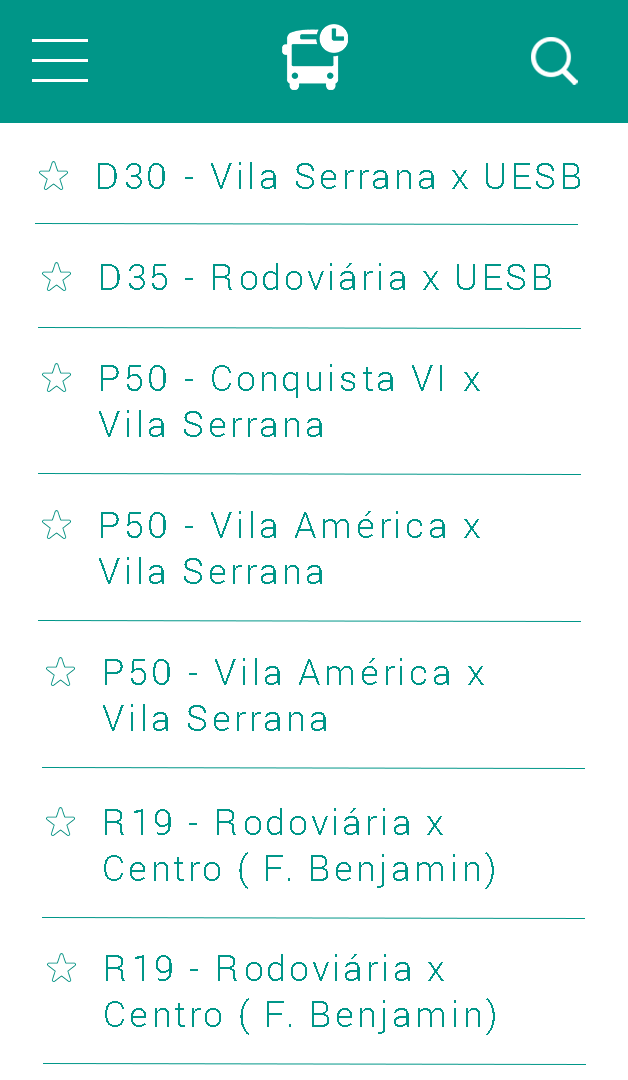
<style>
.page{position:relative;width:628px;height:1080px;background:#ffffff}
.page>*{position:absolute;margin:0}
.t1{font:35.9px "Roboto-Light";letter-spacing:0.1em;color:#009688}
.t2{font:35.9px/46px "Roboto-Light";letter-spacing:0.1em;color:#009688}
</style>
<div class="page">
<p class="t1" style="left:98px;top:162px;width:482px;height:27px">D30 - Vila Serrana x UESB</p>
<p class="t1" style="left:101px;top:263px;width:450px;height:27px">D35 - Rodoviária x UESB</p>
<p class="t2" style="left:99px;top:364px;width:381px;height:73px">P50 - Conquista VI x<br>Vila Serrana</p>
<p class="t2" style="left:99px;top:511px;width:381px;height:73px">P50 - Vila América x<br>Vila Serrana</p>
<p class="t2" style="left:103px;top:658px;width:381px;height:73px">P50 - Vila América x<br>Vila Serrana</p>
<p class="t2" style="left:104px;top:808px;width:390px;height:81px">R19 - Rodoviária x<br>Centro ( F. Benjamin)</p>
<p class="t2" style="left:105px;top:954px;width:390px;height:81px">R19 - Rodoviária x<br>Centro ( F. Benjamin)</p>
</div>
